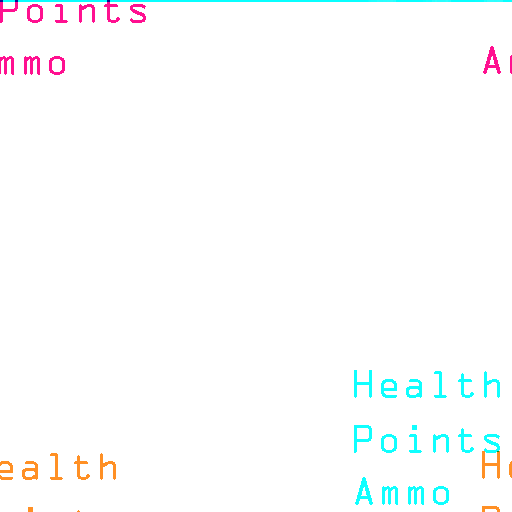
<style>
.page{position:relative;width:512px;height:512px;background:#ffffff}
.page>*{position:absolute;margin:0}
.t1{font:36px "OCRAStd"}
.t2{font:36px "OCRAStd";color:#10ffff}
</style>
<div class="page">
<p class="t1" style="left:354px;top:368px;width:146px;height:28px">Health</p>
<p class="t1" style="left:354px;top:423px;width:146px;height:28px">Points</p>
<p class="t2" style="left:355px;top:475px;width:94px;height:28px">Ammo</p>
</div>
